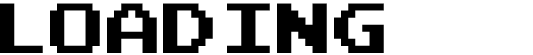
<style>
.page{position:relative;width:533px;height:55px;background:#ffffff}
.page>*{position:absolute;margin:0}
.t1{font:56.5px "PressStart2P";color:#000000}
</style>
<div class="page">
<p class="t1" style="left:0px;top:3px;width:384px;height:50px">LOADING</p>
</div>
